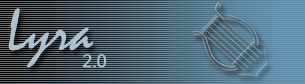
<style>
.page{position:relative;width:305px;height:84px}
.page>*{position:absolute;margin:0}
.t1{font:60px "Mistral";color:#abc3d0}
.t2{font:18px "SegoeUI-Regular";color:#abc3d0;font-weight:bold}
</style>
<div class="page">
<p class="t1" style="left:8px;top:8px;width:86px;height:60px">Lyra</p>
<p class="t2" style="left:82px;top:54px;width:24px;height:14px">2.0</p>
</div>
